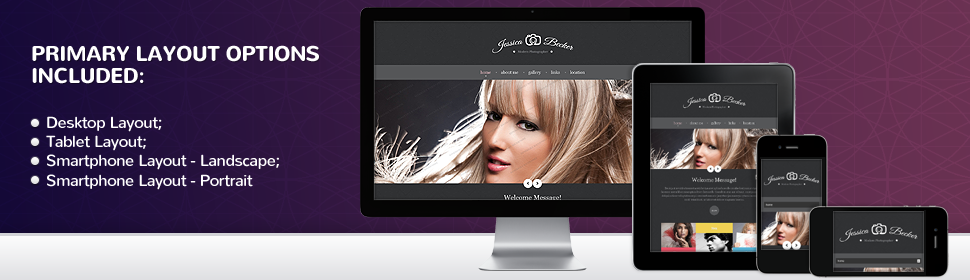
<style>
.page{position:relative;width:970px;height:280px}
.page>*{position:absolute;margin:0}
.t1{font:21px/22px "Nunito-Bold";letter-spacing:-0.025em;color:#ffffff;text-transform:uppercase}
.t2{font:16px "Nunito";letter-spacing:-0.025em;color:#ffffff}
</style>
<div class="page">
<p class="t1" style="left:32px;top:45px;width:287px;height:39px">Primary layout options <br>included:</p>
<p class="t2" style="left:46px;top:116px;width:233px;height:74px">Desktop Layout;<br>Tablet Layout;<br>Smartphone Layout - Landscape;<br>Smartphone Layout - Portrait</p>
</div>
